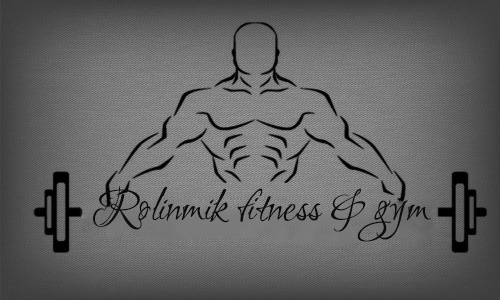
<style>
.page{position:relative;width:500px;height:300px}
.page>*{position:absolute;margin:0}
.t1{font:48px "Ruthie-Regular";color:#0e0d0d}
</style>
<div class="page">
<p class="t1" style="left:93px;top:186px;width:338px;height:56px">Rolinmik fitness &amp; gym</p>
</div>
